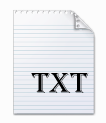
<style>
.page{position:relative;width:106px;height:123px;background:#fcfcfc}
.page>*{position:absolute;margin:0}
.t1{font:30px "Algerian";color:#000000}
</style>
<div class="page">
<p class="t1" style="left:31px;top:73px;width:58px;height:20px">txt</p>
</div>
